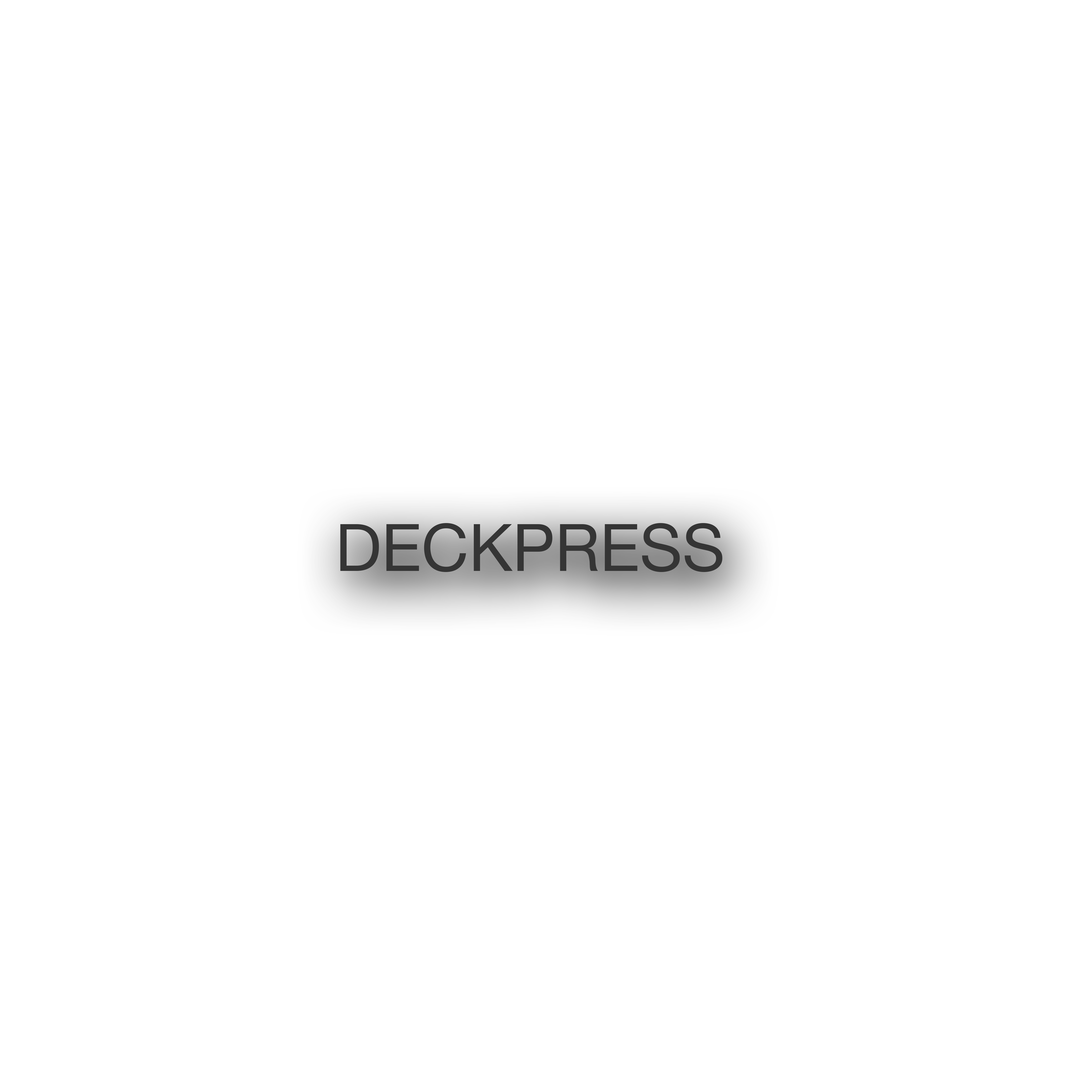
<style>
.page{position:relative;width:1092px;height:1092px;background:#ffffff}
.page>*{position:absolute;margin:0}
.t1{font:65.5px "HelveticaNeue";color:#353535}
</style>
<div class="page">
<p class="t1" style="left:340px;top:523px;width:382px;height:49px">DECKPRESS</p>
</div>
